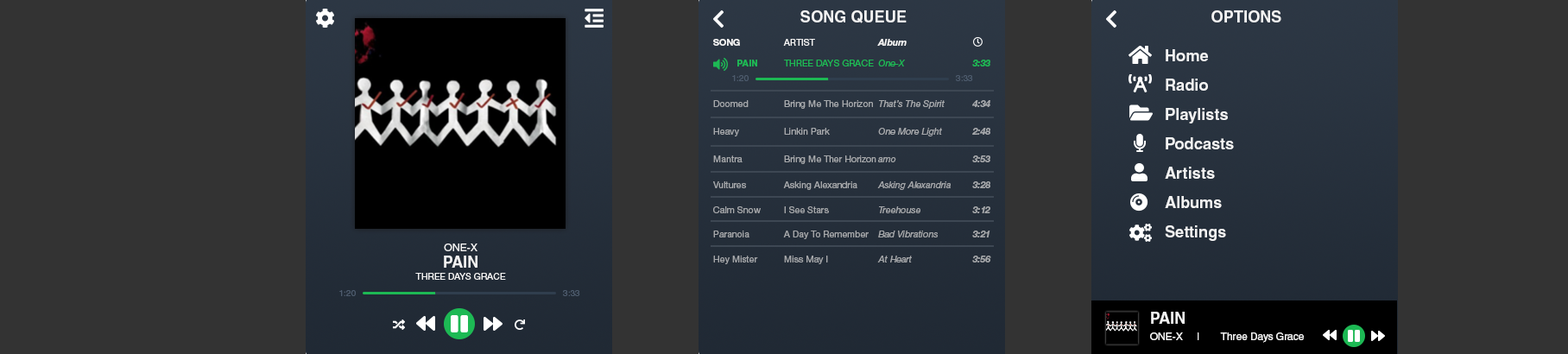
<style>
.page{position:relative;width:1568px;height:354px;background:#333333}
.page>*{position:absolute;margin:0}
.t1{font:15.7px "HelveticaLTStd-Bold";color:#f3f3f3}
.t2{font:9.2px "HelveticaNeueLTStd-Roman";color:#f3f3f3}
.t3{font:9.2px "HelveticaNeueLTStd-Bd";color:#f3f3f3}
.t4{font:9.2px "HelveticaNeueLTStd-BdIt";color:#f3f3f3}
.t5{font:9.2px "HelveticaNeueLTStd-Roman";color:#1db954}
.t6{font:9.2px "HelveticaNeueLTStd-Bd";color:#1db954}
.t7{font:9.2px "HelveticaNeueLTStd-It";color:#1db954}
.t8{font:9.2px "HelveticaNeueLTStd-BdIt";color:#1db954}
.t9{font:8.6px "Helvetica";color:#4d5b6d}
.t10{font:9.2px "HelveticaNeueLTStd-Roman";color:#a6a9ac}
.t11{font:9.2px "HelveticaNeueLTStd-It";color:#a6a9ac}
.t12{font:9.2px "HelveticaNeueLTStd-BdIt";color:#a6a9ac}
.t13{font:9.2px "HelveticaNeueLTStd-Roman";color:#a6a8ac}
.t14{font:9.2px "HelveticaNeueLTStd-It";color:#a6a8ac}
.t15{font:9.2px "HelveticaNeueLTStd-BdIt";color:#a6a8ac}
.t16{font:9.2px "HelveticaNeueLTStd-Roman";color:#a6a8ab}
.t17{font:9.2px "HelveticaNeueLTStd-It";color:#a6a8ab}
.t18{font:9.2px "HelveticaNeueLTStd-BdIt";color:#a6a8ab}
.t19{font:9.2px "HelveticaNeueLTStd-Roman";color:#a5a8ab}
.t20{font:9.2px "HelveticaNeueLTStd-It";color:#a5a8ab}
.t21{font:9.2px "HelveticaNeueLTStd-BdIt";color:#a5a8ab}
.t22{font:9.2px "HelveticaNeueLTStd-Roman";color:#a5a7aa}
.t23{font:9.2px "HelveticaNeueLTStd-It";color:#a5a7aa}
.t24{font:9.2px "HelveticaNeueLTStd-BdIt";color:#a5a7aa}
.t25{font:10.5px "HelveticaLTStd-Roman";color:#f3f3f3}
.t26{font:10.4px "HelveticaLTStd-Roman";color:#f3f3f3}
</style>
<div class="page">
<p class="t1" style="left:800px;top:10px;width:107px;height:13px">SONG QUEUE</p>
<p class="t1" style="left:1211px;top:10px;width:70px;height:12px">OPTIONS</p>
<p class="t2" style="left:713px;top:39px;width:194px;height:7px"><span class="t3">SONG</span>  ARTIST   <span class="t4">Album</span></p>
<p class="t1" style="left:1166px;top:49px;width:42px;height:12px">Home</p>
<p class="t5" style="left:737px;top:60px;width:253px;height:6px"><span class="t6"> PAIN</span>  THREE DAYS GRACE <span class="t7">One-X   </span><span class="t8">3:33</span></p>
<p class="t9" style="left:732px;top:75px;width:17px;height:6px">1:20</p>
<p class="t9" style="left:956px;top:75px;width:17px;height:6px">3:33</p>
<p class="t1" style="left:1166px;top:79px;width:42px;height:12px">Radio</p>
<p class="t10" style="left:713px;top:100px;width:277px;height:9px">Doomed  Bring Me The Horizon <span class="t11">That’s The Spirit  </span><span class="t12">4:34</span></p>
<p class="t1" style="left:1166px;top:108px;width:62px;height:15px">Playlists</p>
<p class="t13" style="left:713px;top:128px;width:277px;height:8px">Heavy  Linkin Park   <span class="t14">One More Light  </span><span class="t15">2:48</span></p>
<p class="t1" style="left:1166px;top:137px;width:68px;height:12px">Podcasts</p>
<p class="t16" style="left:713px;top:155px;width:277px;height:9px">Mantra  Bring Me Ther Horizon <span class="t17">amo    </span><span class="t18">3:53</span></p>
<p class="t1" style="left:1165px;top:167px;width:50px;height:12px">Artists</p>
<p class="t19" style="left:713px;top:181px;width:277px;height:9px">Vultures  Asking Alexandria <span class="t20">Asking Alexandria </span><span class="t21">3:28</span></p>
<p class="t1" style="left:1165px;top:196px;width:57px;height:12px">Albums</p>
<p class="t22" style="left:713px;top:206px;width:277px;height:7px">Calm Snow I See Stars   <span class="t23">Treehouse   </span><span class="t24">3:12</span></p>
<p class="t22" style="left:713px;top:231px;width:277px;height:8px">Paranoia  A Day To Remember <span class="t23">Bad Vibrations  </span><span class="t24">3:21</span></p>
<p class="t1" style="left:1165px;top:225px;width:61px;height:16px">Settings</p>
<p class="t25" style="left:444px;top:243px;width:33px;height:8px">ONE-X</p>
<p class="t1" style="left:444px;top:256px;width:33px;height:12px">PAIN</p>
<p class="t22" style="left:713px;top:256px;width:278px;height:8px">Hey Mister  Miss May I   <span class="t23">At Heart   </span><span class="t24">3:56</span></p>
<p class="t2" style="left:415px;top:273px;width:91px;height:7px">THREE DAYS GRACE</p>
<p class="t9" style="left:339px;top:290px;width:17px;height:6px">1:20</p>
<p class="t9" style="left:563px;top:290px;width:17px;height:6px">3:33</p>
<p class="t1" style="left:1151px;top:312px;width:34px;height:12px">PAIN</p>
<p class="t26" style="left:1150px;top:332px;width:154px;height:11px">ONE-X | Three Days Grace</p>
</div>
